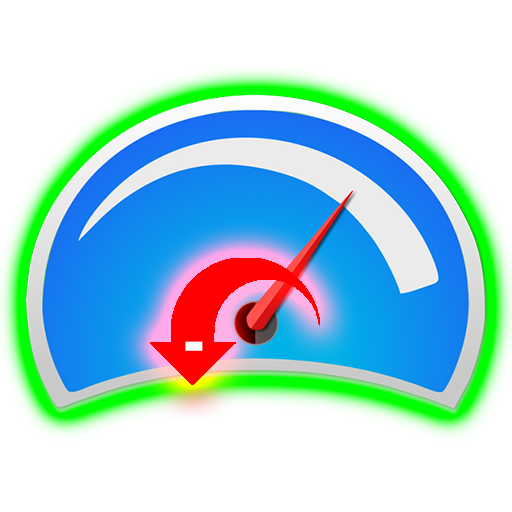
<style>
.page{position:relative;width:512px;height:512px;background:#ffffff}
.page>*{position:absolute;margin:0}
.t1{font:69.4px "BritannicBold";color:#ffffff}
</style>
<div class="page">
<p class="t1" style="left:185px;top:341px;width:18px;height:10px">-</p>
</div>
